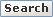
<style>
.page{position:relative;width:53px;height:17px;background:#ffffff}
.page>*{position:absolute;margin:0}
.t1{font:11px "Verdana-Bold";color:#333333}
</style>
<div class="page">
<p class="t1" style="left:5px;top:3px;width:43px;height:9px">Search</p>
</div>
